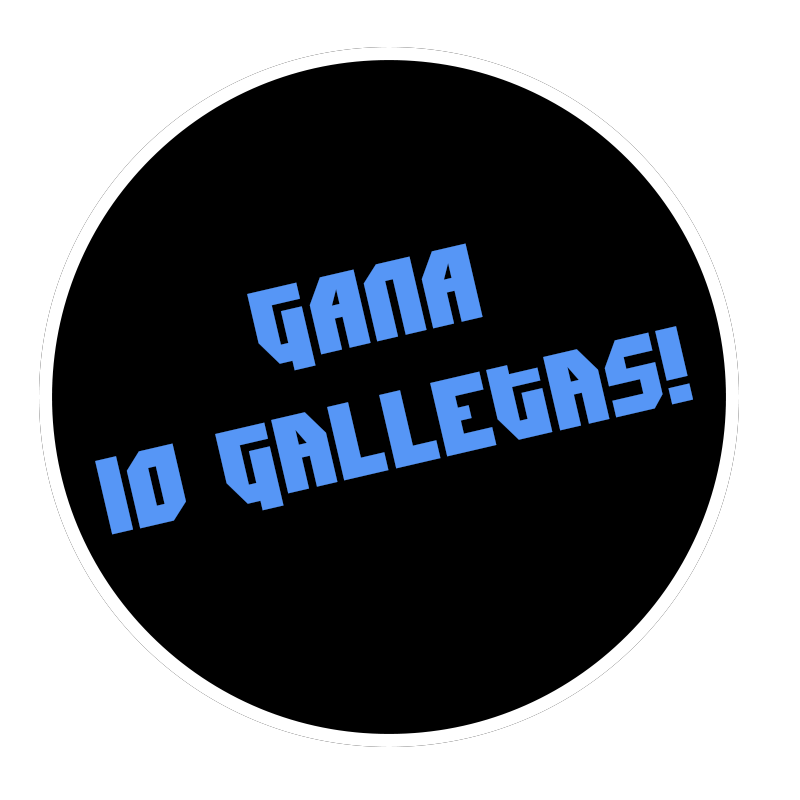
<style>
.page{position:relative;width:800px;height:800px;background:#000000}
.page>*{position:absolute;margin:0}
.t1{font:107.1px "Dimitri";color:#5696f6}
</style>
<div class="page">
<p class="t1" style="left:95px;top:243px;width:598px;height:292px;text-align:center;rotate:-13deg">GANA<br>10 galletas!</p>
</div>
